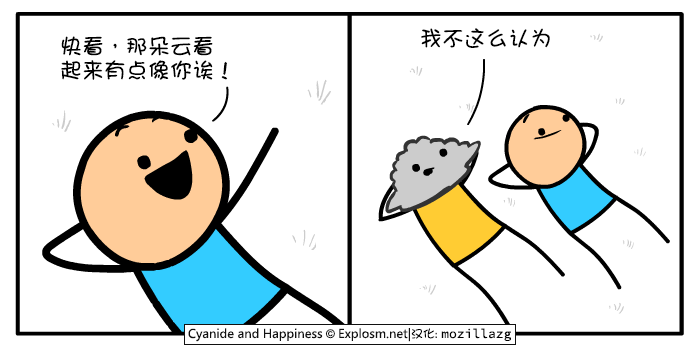
<style>
.page{position:relative;width:700px;height:360px;background:#ffffff}
.page>*{position:absolute;margin:0}
.t1{font:22px "DFGirl";color:#000000}
.t2{font:22px/24px "DFGirl";color:#000000}
</style>
<div class="page">
<p class="t1" style="left:421px;top:28px;width:129px;height:20px">我不这么认为</p>
<p class="t2" style="left:61px;top:36px;width:167px;height:44px">快看，那朵云看<br>起来有点像你诶！</p>
</div>
